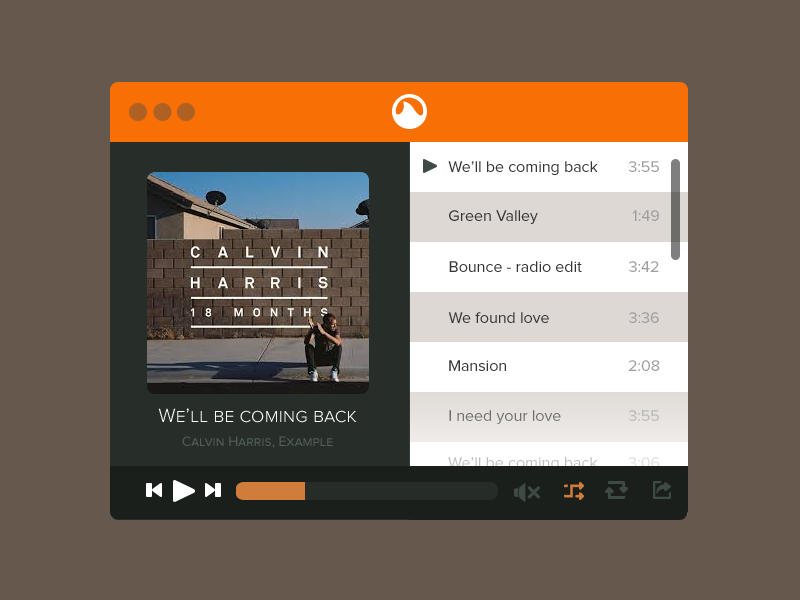
<style>
.page{position:relative;width:800px;height:600px;background:#67584d}
.page>*{position:absolute;margin:0}
.t1{font:16px "ProximaNova-Regular";color:#353535}
.t2{font:16px "ProximaNova-Regular";color:#9e9e9e}
.t3{font:14px/8px "ProximaNova-Regular";color:#536259;font-variant:small-caps}
.t4{font:20px/8px "ProximaNova-Light";color:#ffffff;font-variant:small-caps}
.t5{font:16px "ProximaNova-Regular";color:#717171}
</style>
<div class="page">
<p class="t1" style="left:448px;top:161px;width:211px;height:14px">We’ll be coming back <span class="t2">3:55</span></p>
<p class="t1" style="left:449px;top:210px;width:210px;height:14px">Green Valley    <span class="t2">1:49</span></p>
<p class="t1" style="left:449px;top:261px;width:210px;height:11px">Bounce - radio edit  <span class="t2">3:42</span></p>
<p class="t1" style="left:448px;top:312px;width:211px;height:11px">We found love   <span class="t2">3:36</span></p>
<p class="t1" style="left:449px;top:360px;width:211px;height:11px">Mansion    <span class="t2">2:08</span></p>
<p class="t3" style="left:158px;top:408px;width:199px;height:40px;text-align:center"><span class="t4">We’ll be coming back<br><br><br></span>Calvin Harris, Example</p>
<p class="t5" style="left:449px;top:410px;width:210px;height:14px">I need your love  3:55</p>
</div>
